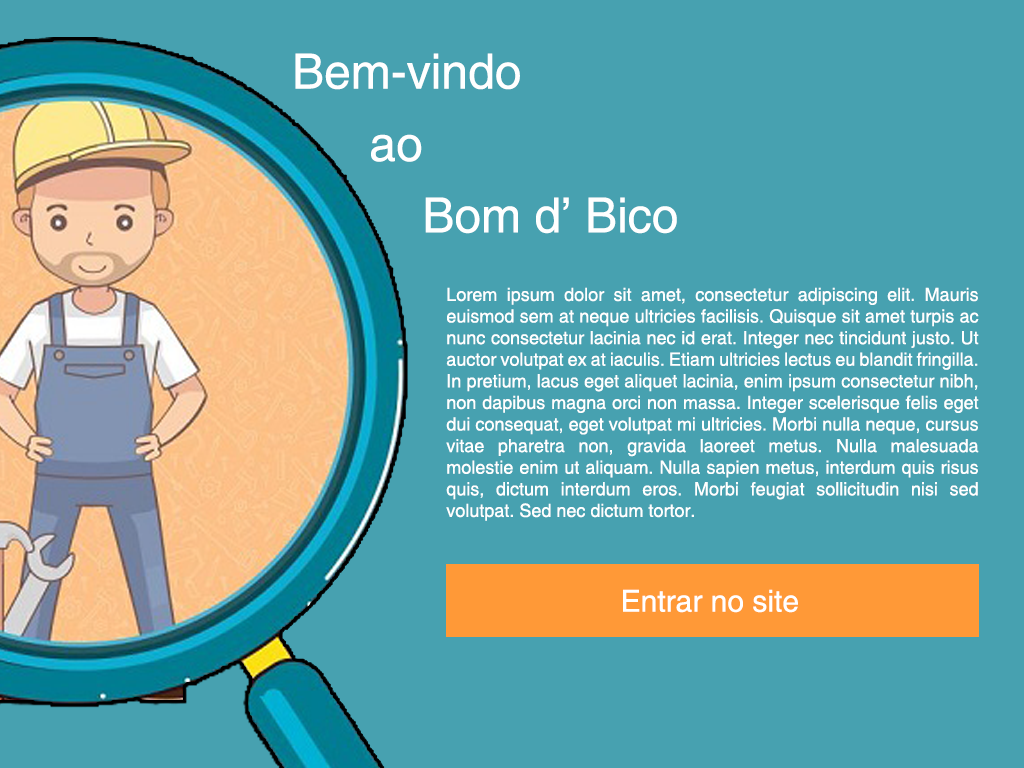
<style>
.page{position:relative;width:1024px;height:768px;background:#47a1b0}
.page>*{position:absolute;margin:0}
.t1{font:48.5px "Helvetica";color:#ffffff}
.t2{font:18.2px "Helvetica";color:#ffffff}
.t3{font:30.3px "Helvetica";color:#ffffff}
</style>
<div class="page">
<p class="t1" style="left:295px;top:53px;width:225px;height:37px">Bem-vindo</p>
<p class="t1" style="left:371px;top:134px;width:51px;height:28px">ao</p>
<p class="t1" style="left:425px;top:197px;width:252px;height:37px">Bom d’ Bico</p>
<p class="t2" style="left:446px;top:287px;width:533px;height:234px;text-align:justify">Lorem ipsum dolor sit amet, consectetur adipiscing elit. Mauris euismod sem at neque ultricies facilisis. Quisque sit amet turpis ac nunc consectetur lacinia nec id erat. Integer nec tincidunt justo. Ut auctor volutpat ex at iaculis. Etiam ultricies lectus eu blandit fringilla. In pretium, lacus eget aliquet lacinia, enim ipsum consectetur nibh, non dapibus magna orci non massa. Integer scelerisque felis eget dui consequat, eget volutpat mi ultricies. Morbi nulla neque, cursus vitae pharetra non, gravida laoreet metus. Nulla malesuada molestie enim ut aliquam. Nulla sapien metus, interdum quis risus quis, dictum interdum eros. Morbi feugiat sollicitudin nisi sed volutpat. Sed nec dictum tortor.</p>
<p class="t3" style="left:623px;top:589px;width:175px;height:24px">Entrar no site</p>
</div>
